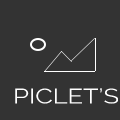
<style>
.page{position:relative;width:120px;height:120px;background:#333333}
.page>*{position:absolute;margin:0}
.t1{font:21px "Raleway-Regular";color:#ffffff;scale:1.21 1}
</style>
<div class="page">
<p class="t1" style="left:15px;top:88px;width:103px;height:16px">PICLET’S</p>
</div>
